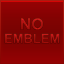
<style>
.page{position:relative;width:64px;height:64px}
.page>*{position:absolute;margin:0}
.t1{font:16px "Arial-BoldMT";color:#a8130f}
.t2{font:13px "Arial-BoldMT";color:#a4120e}
</style>
<div class="page">
<p class="t1" style="left:20px;top:18px;width:24px;height:12px">NO</p>
<p class="t2" style="left:4px;top:33px;width:56px;height:11px">EMBLEM</p>
</div>
